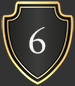
<style>
.page{position:relative;width:75px;height:86px;background:#333333}
.page>*{position:absolute;margin:0}
.t1{font:32.4px "MarcellusSC-Regular";letter-spacing:0.36em;color:#f6f6f6}
</style>
<div class="page">
<p class="t1" style="left:29px;top:27px;width:17px;height:27px">6</p>
</div>
